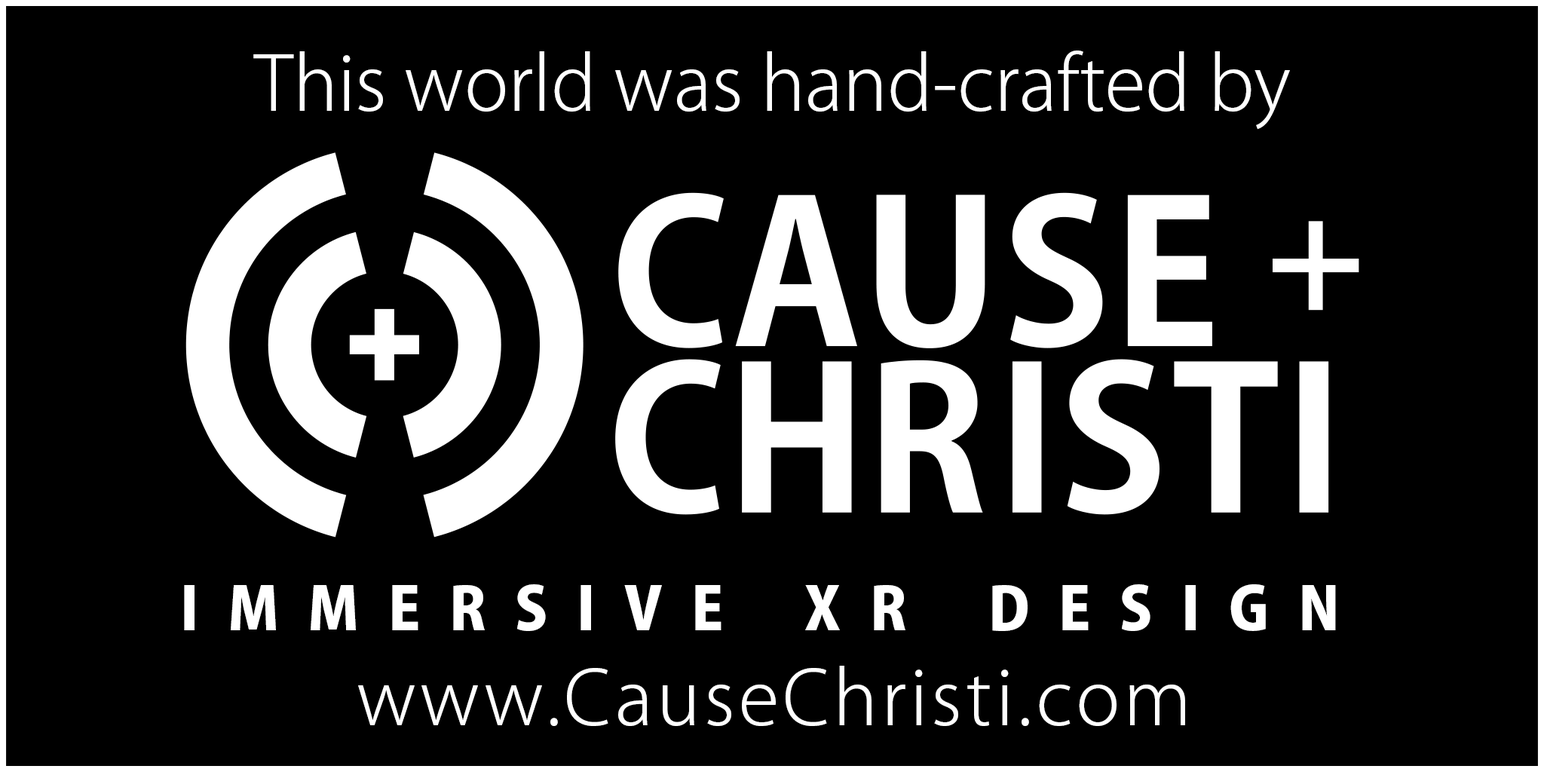
<style>
.page{position:relative;width:1544px;height:772px;background:#000000}
.page>*{position:absolute;margin:0}
.t1{font:74.7px "KozGoPro-Light";color:#ffffff}
.t2{font:58.3px "KozGoPro-Heavy";letter-spacing:0.5em;color:#ffffff}
.t3{font:74.6px "KozGoPro-Light";letter-spacing:0.05em;color:#ffffff}
</style>
<div class="page">
<p class="t1" style="left:253px;top:51px;width:1037px;height:79px">This world was hand-crafted by</p>
<p class="t2" style="left:184px;top:584px;width:1152px;height:47px">IMMERSIVE XR DESIGN</p>
<p class="t3" style="left:358px;top:666px;width:827px;height:60px">www.CauseChristi.com</p>
</div>
